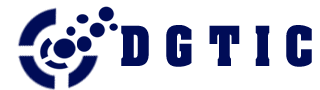
<style>
.page{position:relative;width:320px;height:90px;background:#ffffff}
.page>*{position:absolute;margin:0}
.t1{font:59.5px "Aapex";color:#000c57;scale:0.86 1}
</style>
<div class="page">
<p class="t1" style="left:121px;top:25px;width:191px;height:42px">D G T I C</p>
</div>
